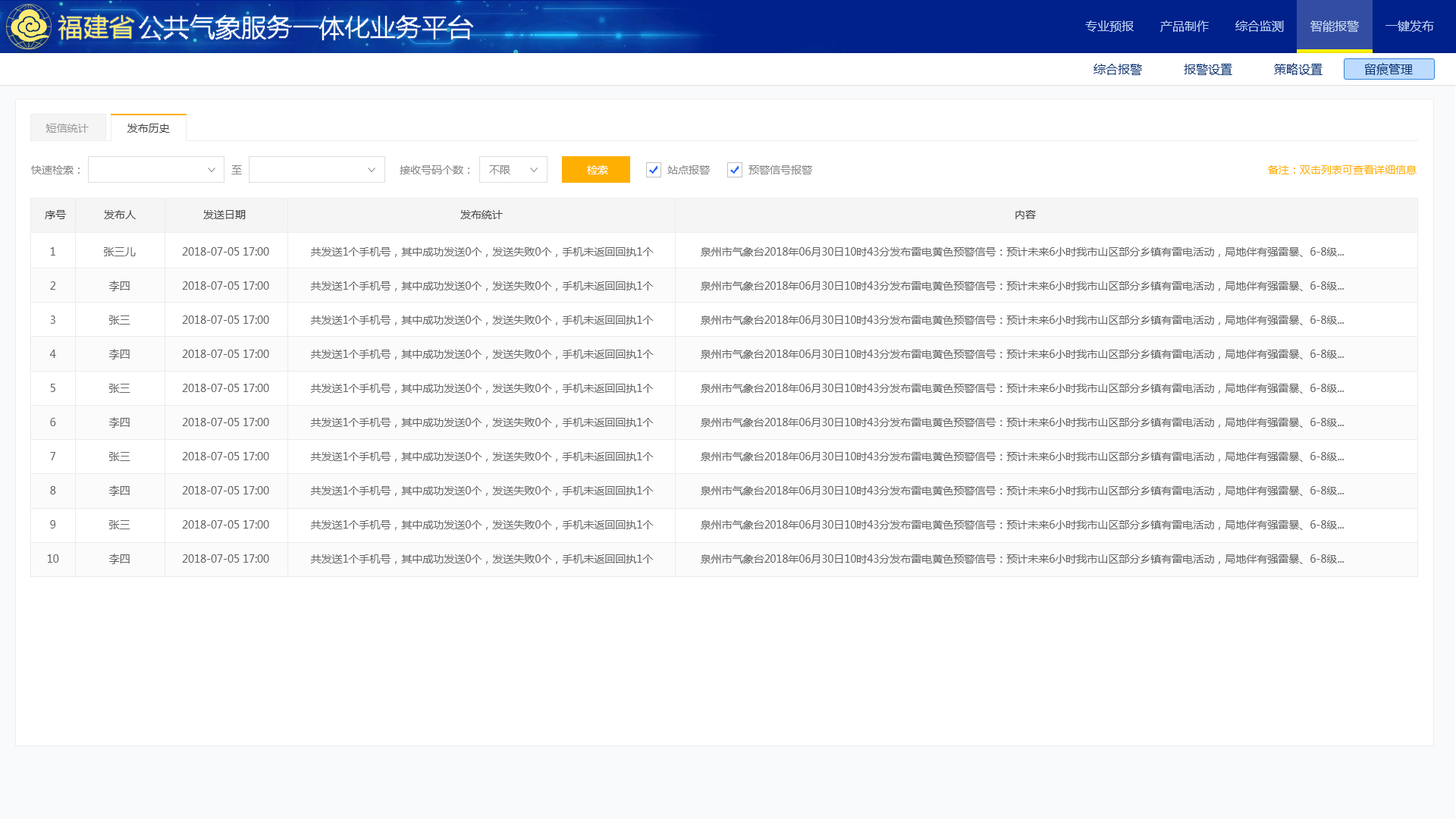
<style>
.page{position:relative;width:1456px;height:819px;background:#ffffff}
.page>*{position:absolute;margin:0}
.t1{font:12.1px "MicrosoftYaHei";color:#b5cfef;text-transform:uppercase}
.t2{font:12.1px "MicrosoftYaHei";color:#083473;text-transform:uppercase}
.t3{font:10.6px "MicrosoftYaHei";color:#999999;text-transform:uppercase}
.t4{font:10.6px "MicrosoftYaHei";color:#444444;text-transform:uppercase}
.t5{font:10.6px "MicrosoftYaHei";color:#888888;text-transform:uppercase}
.t6{font:10.6px "MicrosoftYaHei";color:#ffffff;text-transform:uppercase}
.t7{font:10.6px "MicrosoftYaHei";color:#ffaf02;text-transform:uppercase}
.t8{font:10.6px/34.1px "MicrosoftYaHei";color:#666666;text-transform:uppercase}
</style>
<div class="page">
<p class="t1" style="left:1085px;top:20px;width:349px;height:12px">专业预报       产品制作       综合监测       智能报警       一键发布</p>
<p class="t2" style="left:1094px;top:63px;width:319px;height:12px">综合报警           报警设置           策略设置           留痕管理</p>
<p class="t3" style="left:45px;top:124px;width:44px;height:9px">短信统计</p>
<p class="t4" style="left:127px;top:124px;width:43px;height:9px">发布历史</p>
<p class="t5" style="left:31px;top:165px;width:49px;height:9px">快速检索：</p>
<p class="t5" style="left:231px;top:165px;width:11px;height:9px">至</p>
<p class="t5" style="left:400px;top:165px;width:69px;height:9px">接收号码个数：</p>
<p class="t5" style="left:489px;top:165px;width:21px;height:9px">不限</p>
<p class="t6" style="left:587px;top:165px;width:21px;height:9px">检索</p>
<p class="t5" style="left:667px;top:165px;width:43px;height:9px">站点报警</p>
<p class="t5" style="left:748px;top:165px;width:64px;height:9px">预警信号报警</p>
<p class="t7" style="left:1268px;top:165px;width:149px;height:9px">备注：双击列表可查看详细信息</p>
<p class="t4" style="left:45px;top:210px;width:21px;height:9px">序号</p>
<p class="t4" style="left:104px;top:210px;width:32px;height:9px">发布人</p>
<p class="t4" style="left:203px;top:210px;width:43px;height:9px">发送日期</p>
<p class="t4" style="left:460px;top:210px;width:43px;height:9px">发布统计</p>
<p class="t4" style="left:1015px;top:210px;width:21px;height:9px">内容</p>
<p class="t8" style="left:47px;top:247px;width:12px;height:316px;text-align:center">1<br>2<br>3<br>4<br>5<br>6<br>7<br>8<br>9<br>10</p>
<p class="t8" style="left:104px;top:247px;width:32px;height:317px;text-align:center">张三儿<br>李四<br>张三<br>李四<br>张三<br>李四<br>张三<br>李四<br>张三<br>李四</p>
<p class="t8" style="left:182px;top:247px;width:87px;height:316px;text-align:center">2018-07-05 17:00<br>2018-07-05 17:00<br>2018-07-05 17:00<br>2018-07-05 17:00<br>2018-07-05 17:00<br>2018-07-05 17:00<br>2018-07-05 17:00<br>2018-07-05 17:00<br>2018-07-05 17:00<br>2018-07-05 17:00</p>
<p class="t8" style="left:311px;top:247px;width:343px;height:317px">共发送1个手机号，其中成功发送0个，发送失败0个，手机未返回回执1个<br>共发送1个手机号，其中成功发送0个，发送失败0个，手机未返回回执1个<br>共发送1个手机号，其中成功发送0个，发送失败0个，手机未返回回执1个<br>共发送1个手机号，其中成功发送0个，发送失败0个，手机未返回回执1个<br>共发送1个手机号，其中成功发送0个，发送失败0个，手机未返回回执1个<br>共发送1个手机号，其中成功发送0个，发送失败0个，手机未返回回执1个<br>共发送1个手机号，其中成功发送0个，发送失败0个，手机未返回回执1个<br>共发送1个手机号，其中成功发送0个，发送失败0个，手机未返回回执1个<br>共发送1个手机号，其中成功发送0个，发送失败0个，手机未返回回执1个<br>共发送1个手机号，其中成功发送0个，发送失败0个，手机未返回回执1个</p>
<p class="t8" style="left:701px;top:247px;width:643px;height:317px">泉州市气象台2018年06月30日10时43分发布雷电黄色预警信号：预计未来6小时我市山区部分乡镇有雷电活动，局地伴有强雷暴、6-8级...<br>泉州市气象台2018年06月30日10时43分发布雷电黄色预警信号：预计未来6小时我市山区部分乡镇有雷电活动，局地伴有强雷暴、6-8级...<br>泉州市气象台2018年06月30日10时43分发布雷电黄色预警信号：预计未来6小时我市山区部分乡镇有雷电活动，局地伴有强雷暴、6-8级...<br>泉州市气象台2018年06月30日10时43分发布雷电黄色预警信号：预计未来6小时我市山区部分乡镇有雷电活动，局地伴有强雷暴、6-8级...<br>泉州市气象台2018年06月30日10时43分发布雷电黄色预警信号：预计未来6小时我市山区部分乡镇有雷电活动，局地伴有强雷暴、6-8级...<br>泉州市气象台2018年06月30日10时43分发布雷电黄色预警信号：预计未来6小时我市山区部分乡镇有雷电活动，局地伴有强雷暴、6-8级...<br>泉州市气象台2018年06月30日10时43分发布雷电黄色预警信号：预计未来6小时我市山区部分乡镇有雷电活动，局地伴有强雷暴、6-8级...<br>泉州市气象台2018年06月30日10时43分发布雷电黄色预警信号：预计未来6小时我市山区部分乡镇有雷电活动，局地伴有强雷暴、6-8级...<br>泉州市气象台2018年06月30日10时43分发布雷电黄色预警信号：预计未来6小时我市山区部分乡镇有雷电活动，局地伴有强雷暴、6-8级...<br>泉州市气象台2018年06月30日10时43分发布雷电黄色预警信号：预计未来6小时我市山区部分乡镇有雷电活动，局地伴有强雷暴、6-8级...</p>
</div>
